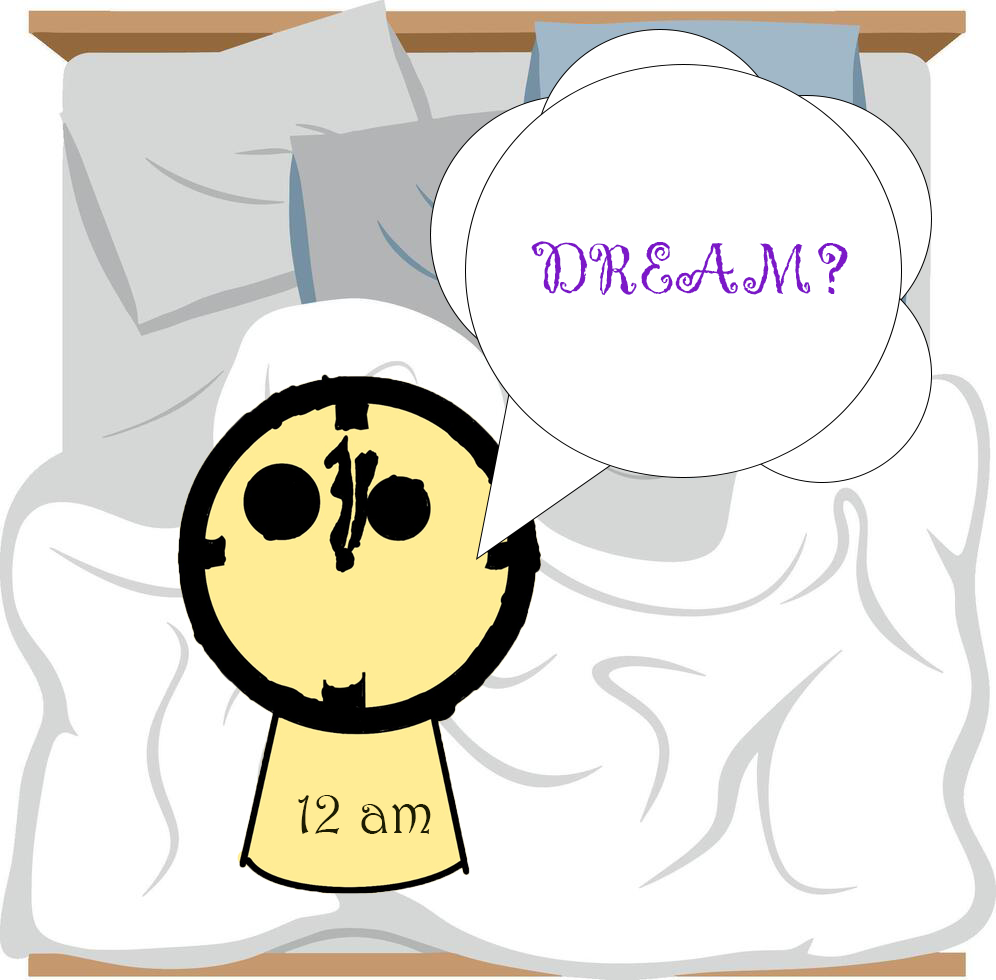
<style>
.page{position:relative;width:996px;height:980px;background:#ffffff}
.page>*{position:absolute;margin:0}
.t1{font:75px "Gigi-Regular";color:#7c18c8}
.t2{font:60px "Harrington";color:#1c1c02}
</style>
<div class="page">
<p class="t1" style="left:531px;top:241px;width:317px;height:55px">DREAM?</p>
<p class="t2" style="left:298px;top:795px;width:133px;height:39px">12 am</p>
</div>
